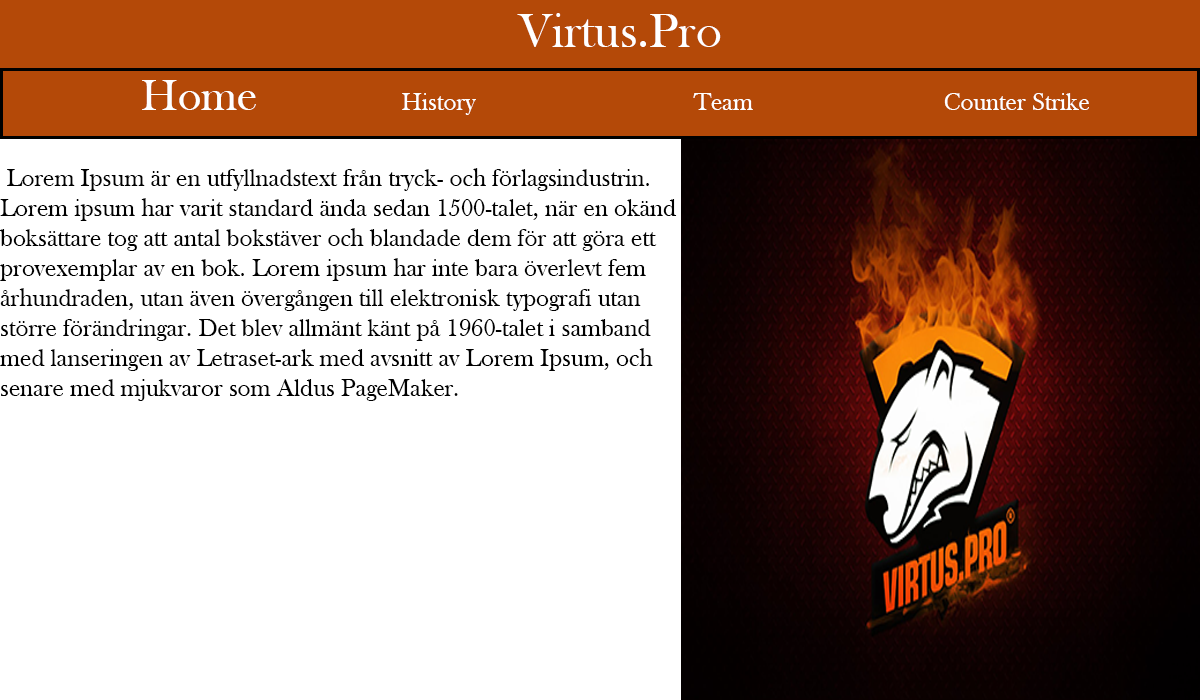
<style>
.page{position:relative;width:1200px;height:700px;background:#ffffff}
.page>*{position:absolute;margin:0}
.t1{font:50px "BaskOldFace";color:#ffffff}
.t2{font:45px "BaskOldFace";color:#ffffff}
.t3{font:25px "BaskOldFace";color:#ffffff}
.t4{font:25px "BaskOldFace";color:#000000}
</style>
<div class="page">
<p class="t1" style="left:517px;top:13px;width:204px;height:34px">Virtus.Pro</p>
<p class="t2" style="left:142px;top:80px;width:114px;height:30px">Home</p>
<p class="t3" style="left:402px;top:93px;width:74px;height:22px">History</p>
<p class="t3" style="left:693px;top:93px;width:60px;height:17px">Team</p>
<p class="t3" style="left:944px;top:93px;width:145px;height:17px">Counter Strike</p>
<p class="t4" style="left:0px;top:168px;width:677px;height:233px">Lorem Ipsum är en utfyllnadstext från tryck- och förlagsindustrin. Lorem ipsum har varit standard ända sedan 1500-talet, när en okänd boksättare tog att antal bokstäver och blandade dem för att göra ett provexemplar av en bok. Lorem ipsum har inte bara överlevt fem århundraden, utan även övergången till elektronisk typografi utan större förändringar. Det blev allmänt känt på 1960-talet i samband med lanseringen av Letraset-ark med avsnitt av Lorem Ipsum, och senare med mjukvaror som Aldus PageMaker.</p>
</div>
